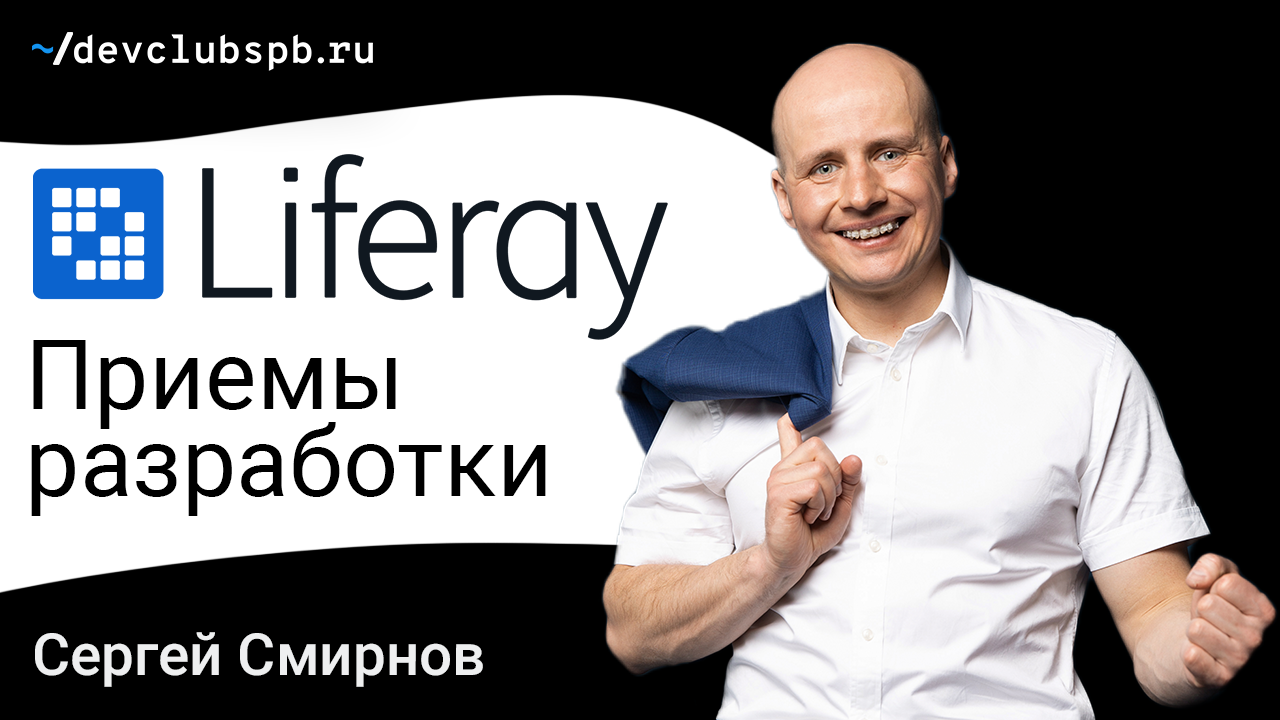
<style>
.page{position:relative;width:1280px;height:720px;background:#000000}
.page>*{position:absolute;margin:0}
.t1{font:97.2px/87.5px "Roboto-Regular";color:#000000}
.t2{font:58.3px "Roboto-Medium";color:#eeeff0}
</style>
<div class="page">
<p class="t1" style="left:31px;top:340px;width:515px;height:176px">Приемы<br>разработки</p>
<p class="t2" style="left:35px;top:632px;width:448px;height:55px">Сергей Смирнов</p>
</div>
